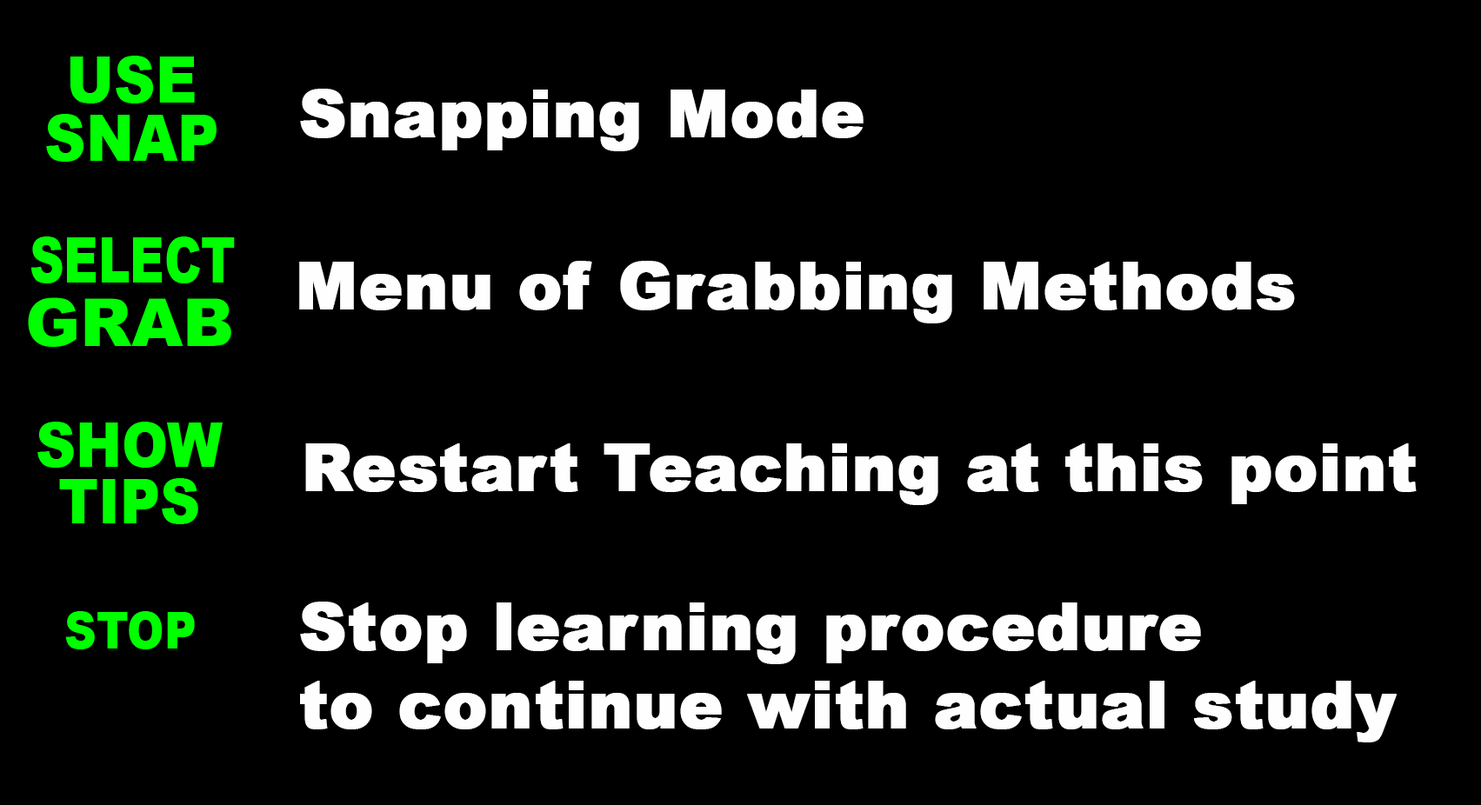
<style>
.page{position:relative;width:1481px;height:805px;background:#000000}
.page>*{position:absolute;margin:0}
.t1{font:65.2px "Arial-Black";color:#fffefe;font-weight:bold}
</style>
<div class="page">
<p class="t1" style="left:300px;top:89px;width:563px;height:62px">Snapping Mode</p>
<p class="t1" style="left:299px;top:261px;width:996px;height:62px">Menu of Grabbing Methods</p>
<p class="t1" style="left:305px;top:443px;width:1112px;height:62px">Restart Teaching at this point</p>
<p class="t1" style="left:300px;top:602px;width:1097px;height:141px">Stop learning procedure <br>to continue with actual study</p>
</div>
